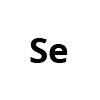
<style>
.page{position:relative;width:100px;height:100px;background:#ffffff}
.page>*{position:absolute;margin:0}
.t1{font:35px "OpenSans-Bold";color:#000000}
</style>
<div class="page">
<p class="t1" style="left:30px;top:38px;width:38px;height:25px">Se</p>
</div>
